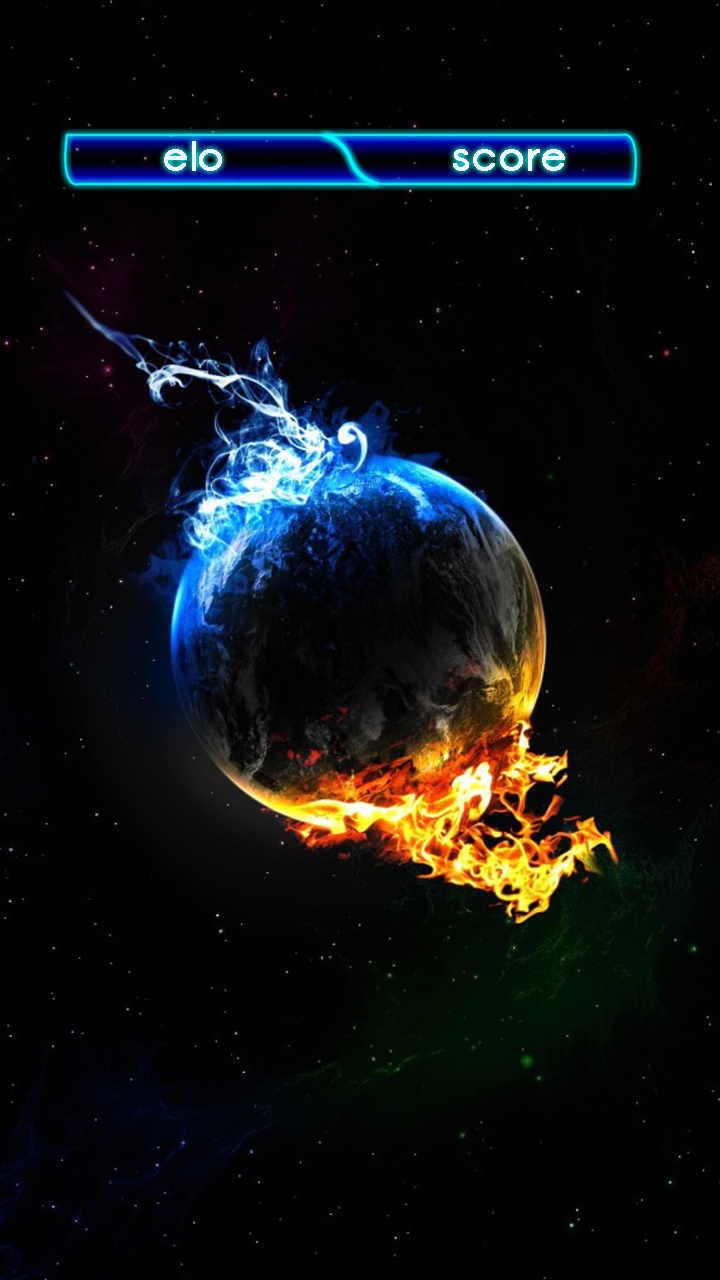
<style>
.page{position:relative;width:720px;height:1280px;background:#000000}
.page>*{position:absolute;margin:0}
.t1{font:40.8px "Opificio";letter-spacing:0.05em;color:#ffffff;font-weight:bold}
</style>
<div class="page">
<p class="t1" style="left:164px;top:141px;width:58px;height:30px">elo</p>
<p class="t1" style="left:453px;top:149px;width:112px;height:22px">score</p>
</div>
